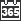
<style>
.page{position:relative;width:21px;height:21px;background:#333333}
.page>*{position:absolute;margin:0}
.t1{font:11px "Arial-Black";color:#ffffff;scale:0.8 1}
</style>
<div class="page">
<p class="t1" style="left:2px;top:8px;width:18px;height:8px">365</p>
</div>
